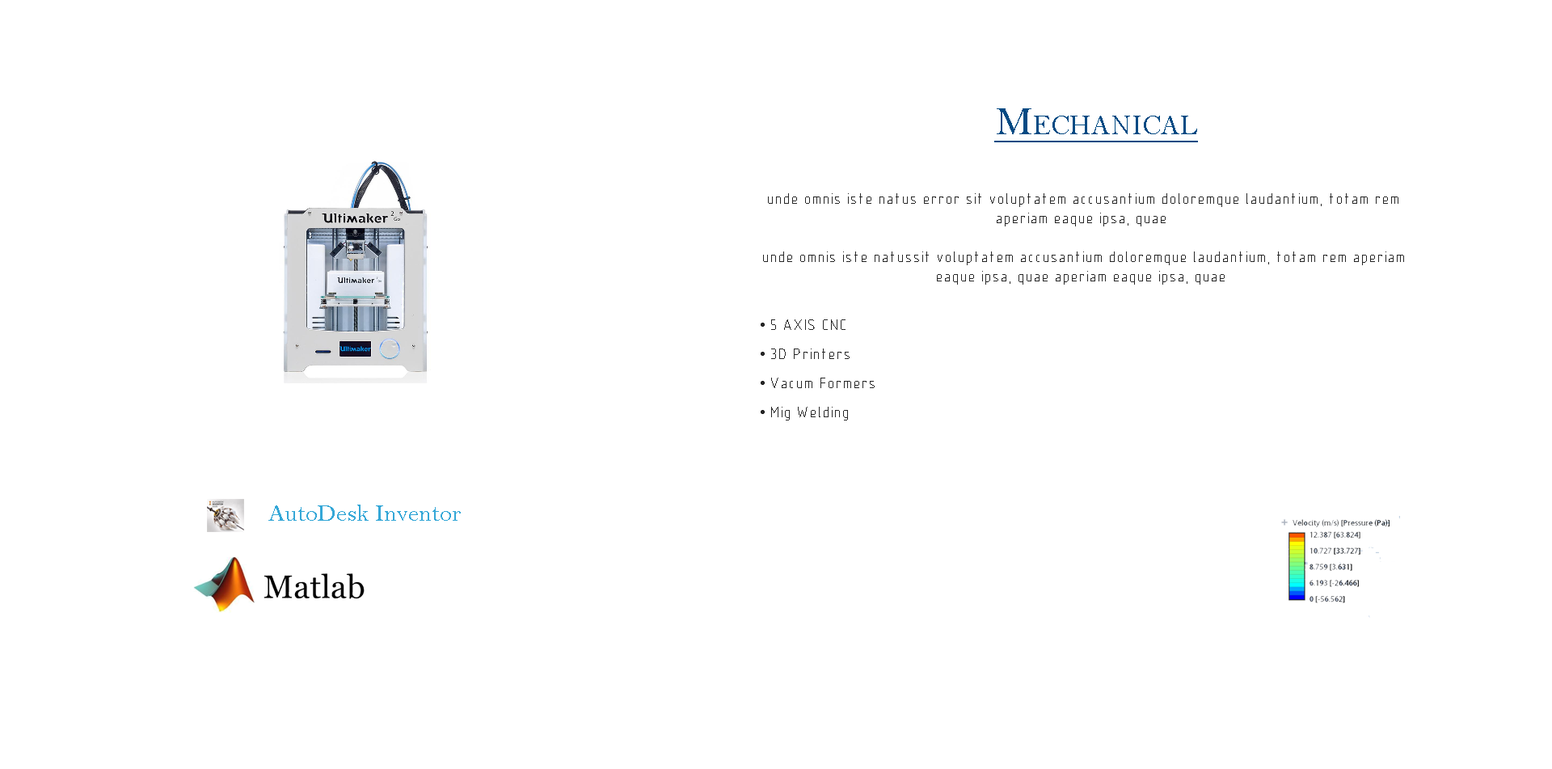
<style>
.page{position:relative;width:1552px;height:769px;background:#ffffff}
.page>*{position:absolute;margin:0}
.t1{font:40.4px "BellMT";color:#004a83;font-variant:small-caps;text-decoration:underline}
.t2{font:16.2px "GENISO";color:#272727}
.t3{font:16.2px/29.1px "GENISO";color:#272727}
.t4{font:16.2px/29.1px "TimesNewRomanPSMT";color:#272727}
.t5{font:24.2px "BellMT";color:#34a7d7}
</style>
<div class="page">
<p class="t1" style="left:994px;top:108px;width:204px;height:34px">Mechanical</p>
<p class="t2" style="left:763px;top:193px;width:641px;height:91px;text-align:center">unde omnis iste natus error sit voluptatem accusantium doloremque laudantium, totam rem aperiam eaque ipsa, quae <br><br> unde omnis iste natussit voluptatem accusantium doloremque laudantium, totam rem aperiam eaque ipsa, quae aperiam eaque ipsa, quae</p>
<p class="t3" style="left:760px;top:319px;width:114px;height:101px"><span class="t4">• </span>5 AXIS CNC<br><span class="t4">• </span>3D Printers<br><span class="t4">• </span>Vacum Formers<br><span class="t4">• </span>Mig Welding</p>
<p class="t5" style="left:268px;top:504px;width:193px;height:16px">AutoDesk Inventor</p>
</div>
